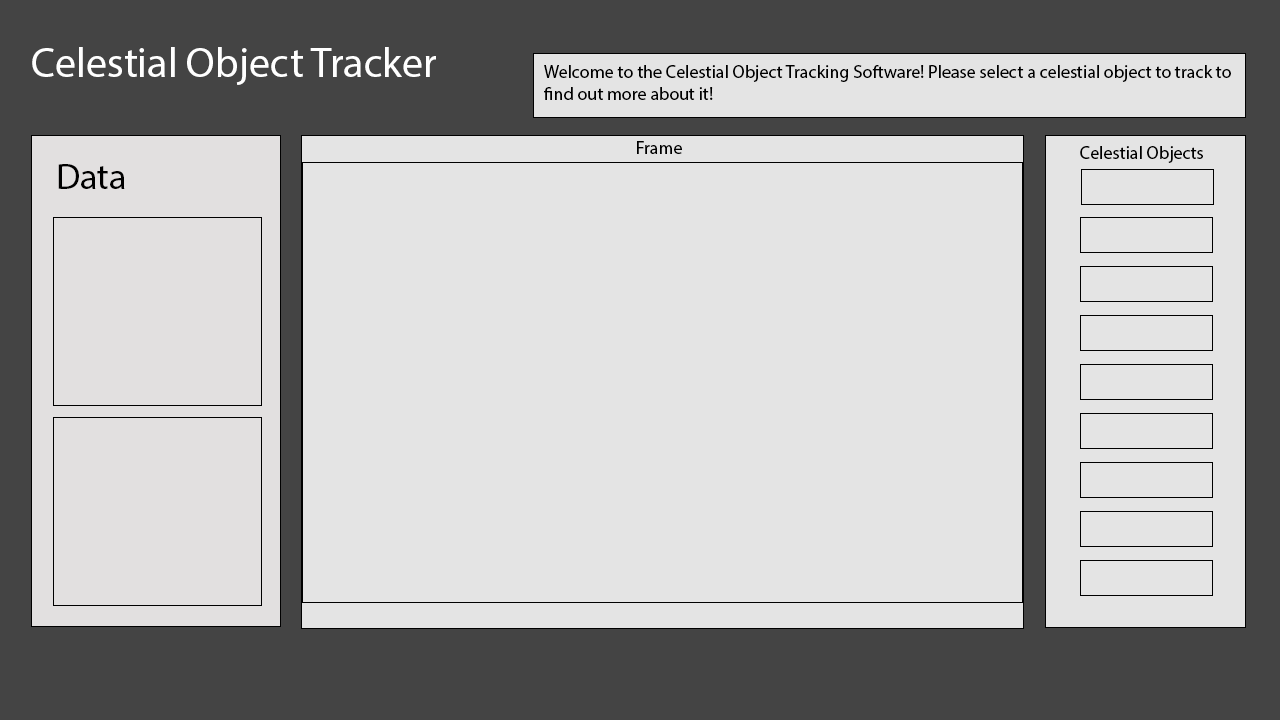
<style>
.page{position:relative;width:1280px;height:720px;background:#e4e4e4}
.page>*{position:absolute;margin:0}
.t1{font:42px "MyriadPro-Regular";color:#ffffff}
.t2{font:18px "MyriadPro-Regular";color:#000000}
.t3{font:36px "MyriadPro-Regular";color:#000000}
</style>
<div class="page">
<p class="t1" style="left:32px;top:47px;width:404px;height:38px">Celestial Object Tracker</p>
<p class="t2" style="left:544px;top:65px;width:687px;height:35px">Welcome to the Celestial Object Tracking Software! Please select a celestial object to track to find out more about it!</p>
<p class="t2" style="left:637px;top:141px;width:45px;height:13px">Frame</p>
<p class="t2" style="left:1080px;top:146px;width:123px;height:17px">Celestial Objects</p>
<p class="t3" style="left:58px;top:164px;width:67px;height:25px">Data</p>
</div>
